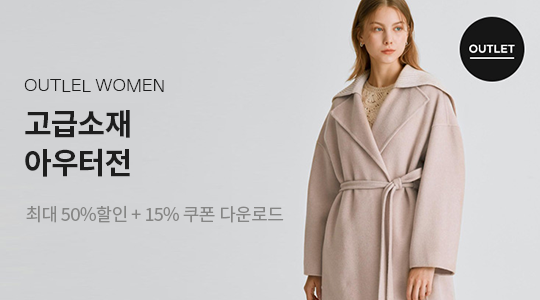
<style>
.page{position:relative;width:540px;height:300px}
.page>*{position:absolute;margin:0}
.t1{font:16px "NanumBarunGothicLight";letter-spacing:0.015em;color:#1e1e1e;scale:1.1 1}
.t2{font:30px "NotoSansKR-Bold";letter-spacing:-0.03em;color:#1e1e1e}
.t3{font:18px "NotoSansKR-Regular";letter-spacing:-0.03em;color:#868685}
</style>
<div class="page">
<p class="t1" style="left:24px;top:79px;width:140px;height:13px">OUTLEL WOMEN</p>
<p class="t2" style="left:25px;top:110px;width:105px;height:28px">고급소재</p>
<p class="t2" style="left:25px;top:148px;width:105px;height:29px">아우터전</p>
<p class="t3" style="left:26px;top:205px;width:258px;height:18px">최대 50%할인 + 15% 쿠폰 다운로드</p>
</div>
